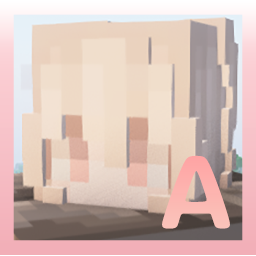
<style>
.page{position:relative;width:256px;height:256px}
.page>*{position:absolute;margin:0}
.t1{font:98.3px "SuperpopVF-Regular";color:#fcb7b1;text-transform:uppercase}
</style>
<div class="page">
<p class="t1" style="left:162px;top:155px;width:68px;height:74px">A</p>
</div>
